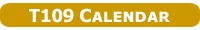
<style>
.page{position:relative;width:200px;height:30px;background:#cc9900}
.page>*{position:absolute;margin:0}
.t1{font:17.9px "TahomaSmallCap-Bold";color:#ffffff}
</style>
<div class="page">
<p class="t1" style="left:29px;top:8px;width:141px;height:15px">T109 Calendar</p>
</div>
